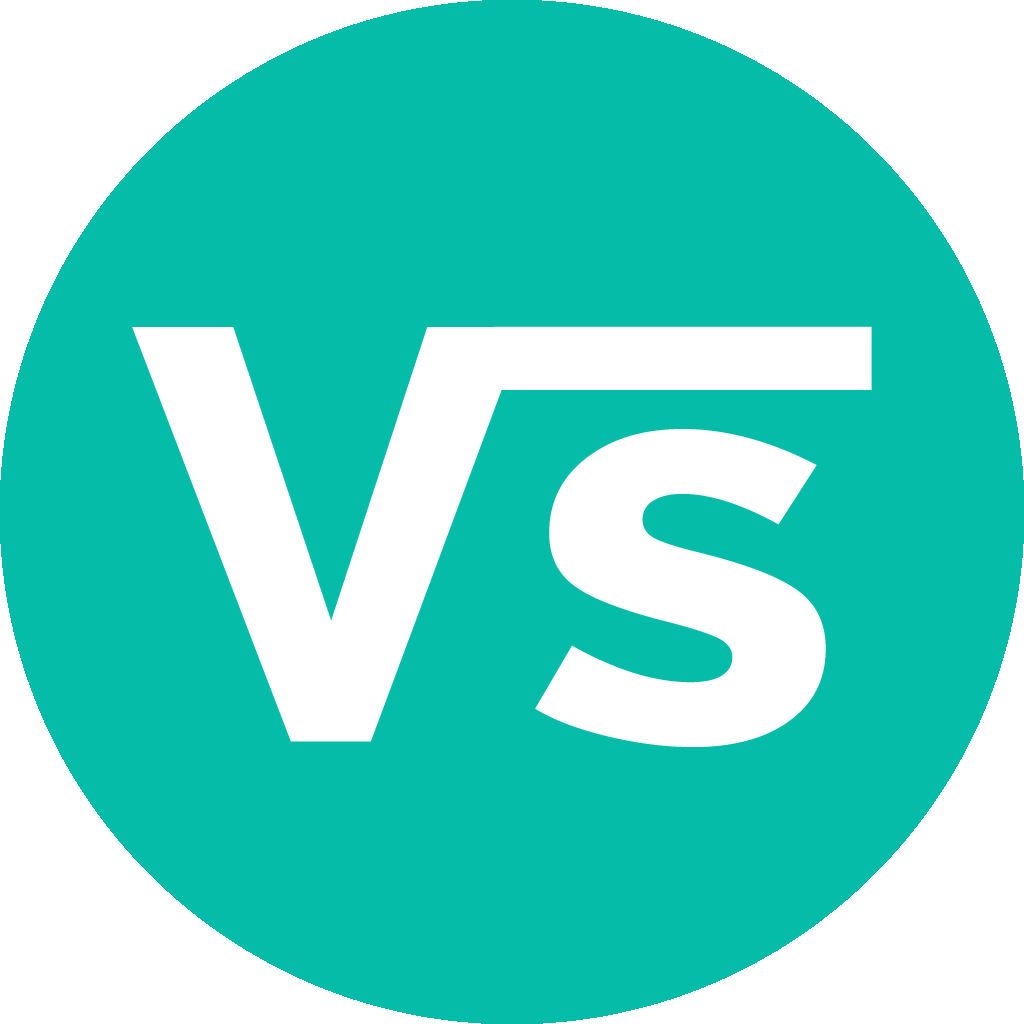
<style>
.page{position:relative;width:1024px;height:1024px;background:#05bca9}
.page>*{position:absolute;margin:0}
.t1{font:583.3px "Raleway-ExtraBold";color:#ffffff}
</style>
<div class="page">
<p class="t1" style="left:132px;top:327px;width:694px;height:420px">Vs</p>
</div>
